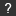
<style>
.page{position:relative;width:16px;height:16px;background:#333333}
.page>*{position:absolute;margin:0}
.t1{font:13px "ArialMT";color:#ffffff}
</style>
<div class="page">
<p class="t1" style="left:5px;top:3px;width:7px;height:10px">?</p>
</div>
